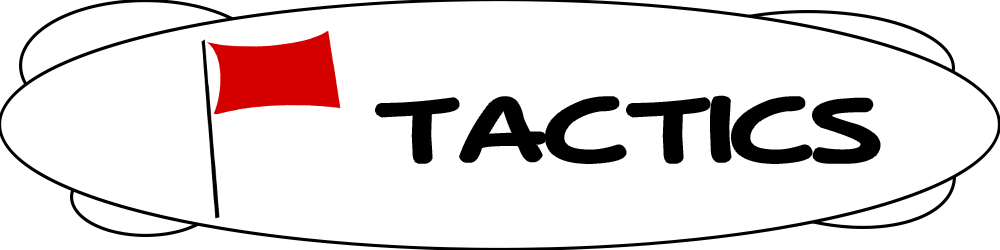
<style>
.page{position:relative;width:1000px;height:250px;background:#ffffff}
.page>*{position:absolute;margin:0}
.t1{font:58px "HeyGorgeous";color:#000000;scale:1.28 1}
</style>
<div class="page">
<p class="t1" style="left:376px;top:96px;width:504px;height:67px">TACTICS</p>
</div>
